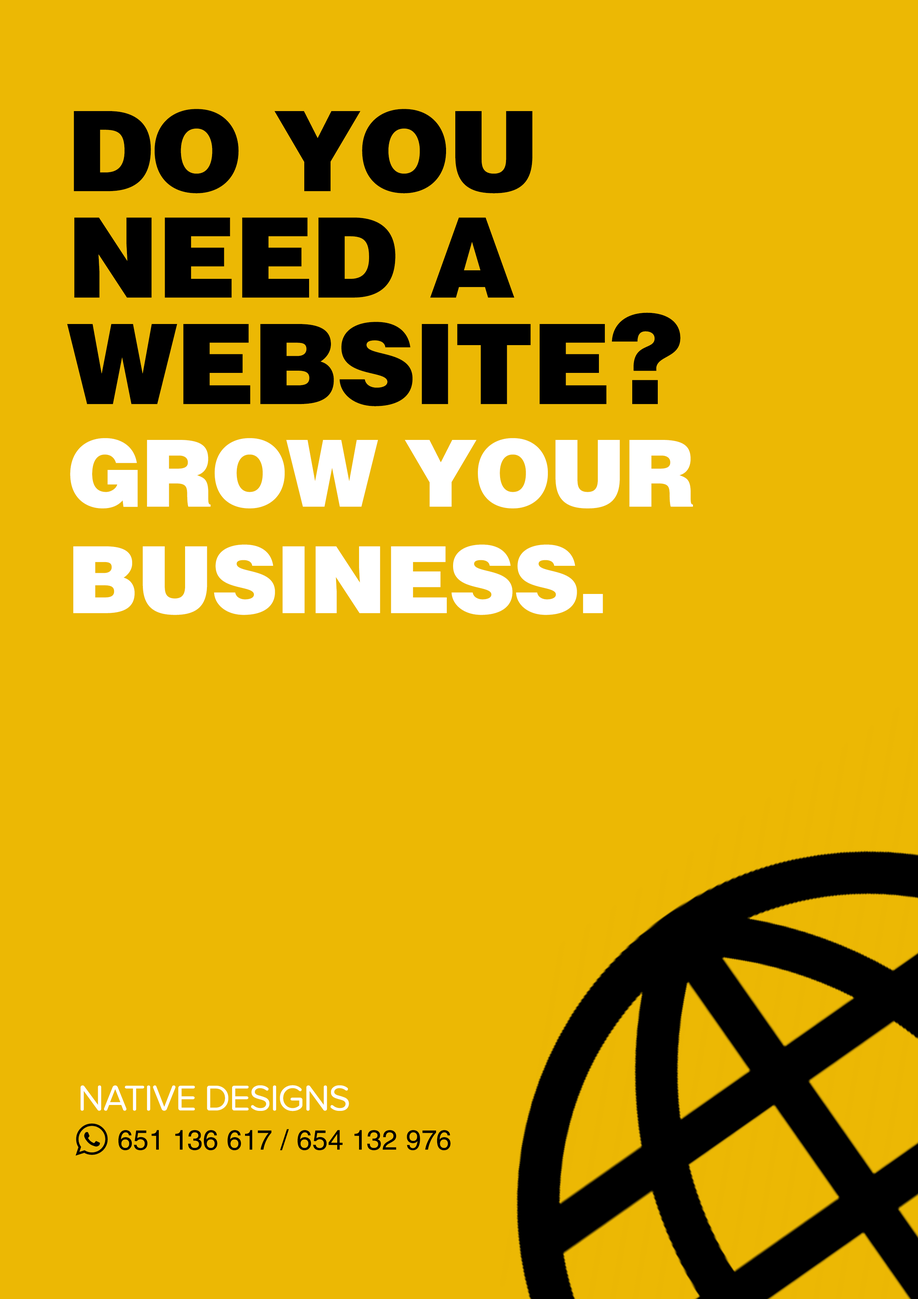
<style>
.page{position:relative;width:918px;height:1299px;background:#ecb804}
.page>*{position:absolute;margin:0}
.t1{font:111.1px/106.4px "HelveticaLTStd-Blk";letter-spacing:-0.025em;color:#000000}
.t2{font:123.4px/106.4px "HelveticaLTStd-Blk";letter-spacing:-0.025em;color:#000000}
.t3{font:92.6px/106.4px "HelveticaLTStd-Blk";letter-spacing:-0.025em;color:#ffffff}
.t4{font:37px "ProximaNovaSoft-Regular";letter-spacing:-0.025em;color:#ffffff}
.t5{font:27.8px "HelveticaLTStd-Roman";letter-spacing:0.01em;color:#000000}
</style>
<div class="page">
<p class="t1" style="left:67px;top:109px;width:613px;height:297px">DO YOU <br>NEED A <br>WEBSITE<span class="t2">?</span></p>
<p class="t3" style="left:70px;top:438px;width:623px;height:177px">GROW YOUR<br>BUSINESS.</p>
<p class="t4" style="left:80px;top:1085px;width:269px;height:26px">NATIVE DESIGNS</p>
<p class="t5" style="left:118px;top:1129px;width:333px;height:21px">651 136 617 / 654 132 976</p>
</div>
